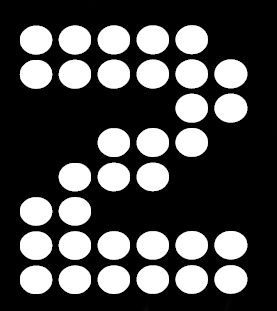
<style>
.page{position:relative;width:277px;height:311px;background:#000000}
.page>*{position:absolute;margin:0}
.t1{font:402.7px "Ozone";color:#ffffff;scale:1.14 1}
</style>
<div class="page">
<p class="t1" style="left:19px;top:25px;width:229px;height:269px">2</p>
</div>
